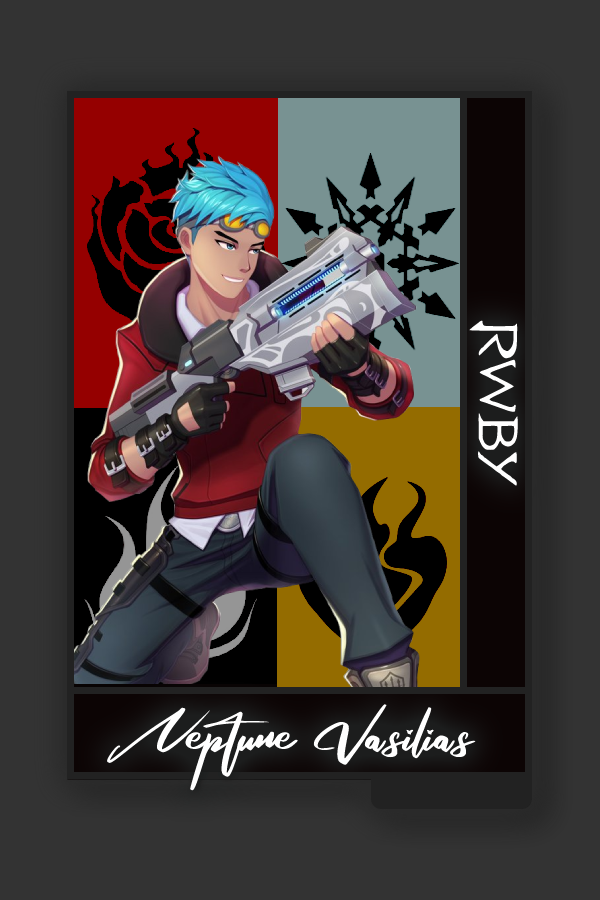
<style>
.page{position:relative;width:600px;height:900px;background:#333333}
.page>*{position:absolute;margin:0}
.t1{font:61.3px "RWBY_Style";color:#ffffff;scale:1.25 1}
.t2{font:76.6px "RosegaFREE";color:#ffffff;scale:0.91 1}
</style>
<div class="page">
<p class="t1" style="left:469px;top:320px;width:49px;height:166px;rotate:90deg">RWBY</p>
<p class="t2" style="left:106px;top:704px;width:370px;height:87px">Neptune Vasilias</p>
</div>
